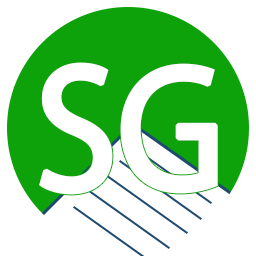
<style>
.page{position:relative;width:256px;height:256px;background:#ffffff}
.page>*{position:absolute;margin:0}
.t1{font:183px "MyriadPro-Regular";letter-spacing:-0.025em;color:#ffffff;font-weight:bold;scale:0.91 1}
</style>
<div class="page">
<p class="t1" style="left:39px;top:62px;width:179px;height:133px">SG</p>
</div>
